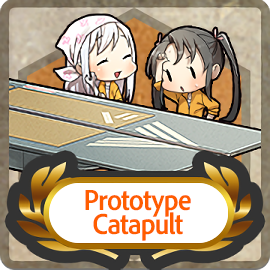
<style>
.page{position:relative;width:270px;height:270px}
.page>*{position:absolute;margin:0}
.t1{font:30px/24px "AdobeClean-Bold";letter-spacing:-0.04em;color:#ff5d00;scale:0.9 1}
</style>
<div class="page">
<p class="t1" style="left:85px;top:190px;width:106px;height:51px;text-align:center">Prototype<br>Catapult</p>
</div>
